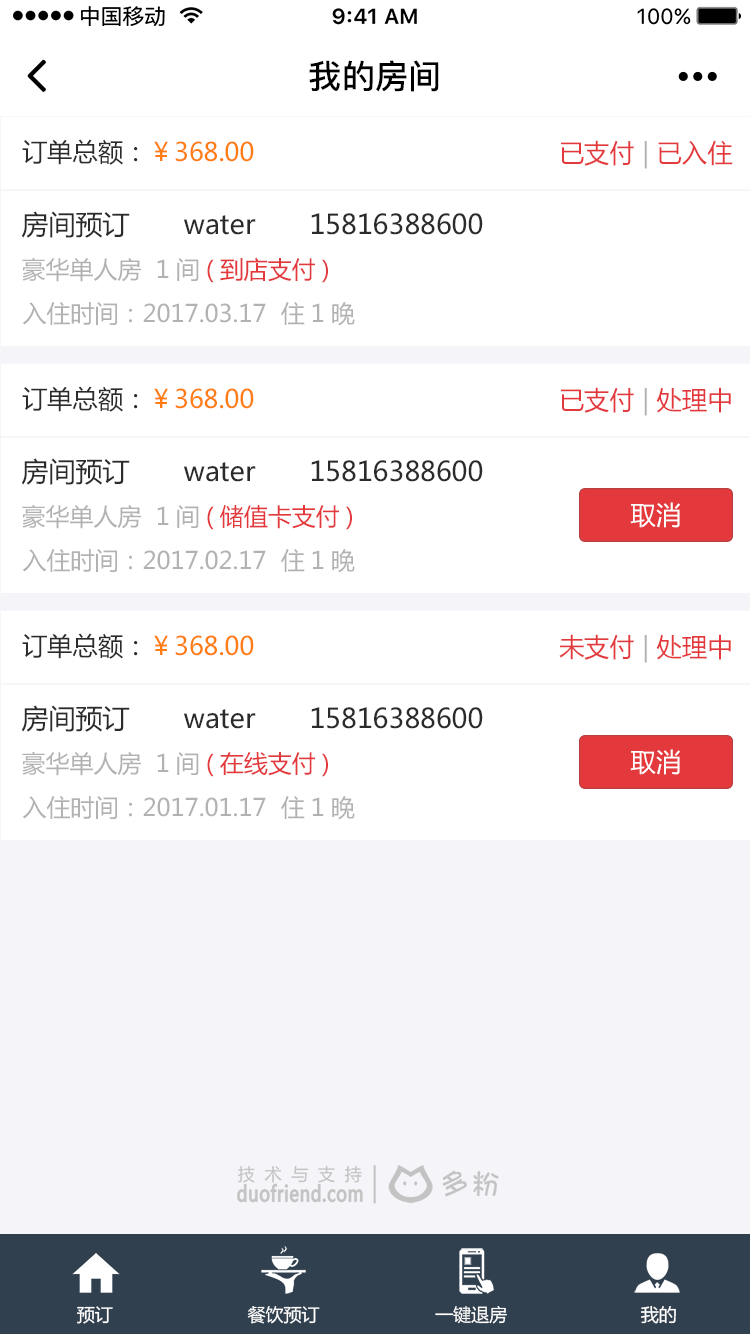
<style>
.page{position:relative;width:750px;height:1334px;background:#ffffff}
.page>*{position:absolute;margin:0}
.t1{font:33.2px "PingFang-SC-Bold";color:#000000}
.t2{font:25.4px "MicrosoftYaHei";color:#ff7d13}
.t3{font:25.4px "MicrosoftYaHei";color:#2b2b2b}
.t4{font:25.4px "MicrosoftYaHei";color:#e4393c}
.t5{font:25.4px "MicrosoftYaHei";color:#b2b2b2}
.t6{font:27px "MicrosoftYaHei";color:#2b2b2b}
.t7{font:24px "MicrosoftYaHei";color:#b2b2b2}
.t8{font:24px "MicrosoftYaHei";color:#e4393c}
.t9{font:25.4px "MicrosoftYaHei";color:#ffffff}
.t10{font:18px "MicrosoftYaHei";color:#ffffff}
</style>
<div class="page">
<p class="t1" style="left:309px;top:60px;width:130px;height:32px">我的房间</p>
<p class="t2" style="left:22px;top:139px;width:232px;height:26px"><span class="t3">订单总额：</span>￥368.00</p>
<p class="t4" style="left:561px;top:140px;width:172px;height:29px">已支付 <span class="t5">| </span>已入住</p>
<p class="t6" style="left:21px;top:211px;width:462px;height:27px">房间预订　　water　　15816388600</p>
<p class="t7" style="left:22px;top:257px;width:306px;height:26px">豪华单人房  1间<span class="t8">(到店支付)</span></p>
<p class="t7" style="left:23px;top:302px;width:332px;height:24px">入住时间：2017.03.17  住1晚</p>
<p class="t2" style="left:22px;top:386px;width:232px;height:26px"><span class="t3">订单总额：</span>￥368.00</p>
<p class="t4" style="left:561px;top:387px;width:170px;height:29px">已支付 <span class="t5">| </span>处理中</p>
<p class="t6" style="left:21px;top:458px;width:462px;height:27px">房间预订　　water　　15816388600</p>
<p class="t7" style="left:22px;top:505px;width:330px;height:25px">豪华单人房  1间<span class="t8">(储值卡支付)</span></p>
<p class="t9" style="left:630px;top:502px;width:50px;height:26px">取消</p>
<p class="t7" style="left:23px;top:549px;width:332px;height:24px">入住时间：2017.02.17  住1晚</p>
<p class="t2" style="left:22px;top:633px;width:232px;height:26px"><span class="t3">订单总额：</span>￥368.00</p>
<p class="t4" style="left:559px;top:634px;width:172px;height:29px">未支付 <span class="t5">| </span>处理中</p>
<p class="t6" style="left:21px;top:705px;width:462px;height:27px">房间预订　　water　　15816388600</p>
<p class="t9" style="left:630px;top:749px;width:50px;height:26px">取消</p>
<p class="t7" style="left:22px;top:752px;width:306px;height:25px">豪华单人房  1间<span class="t8">(在线支付)</span></p>
<p class="t7" style="left:23px;top:796px;width:332px;height:24px">入住时间：2017.01.17  住1晚</p>
<p class="t10" style="left:77px;top:1306px;width:36px;height:18px">预订</p>
<p class="t10" style="left:247px;top:1306px;width:73px;height:18px">餐饮预订</p>
<p class="t10" style="left:435px;top:1306px;width:72px;height:18px">一键退房</p>
<p class="t10" style="left:641px;top:1305px;width:35px;height:19px">我的</p>
</div>
